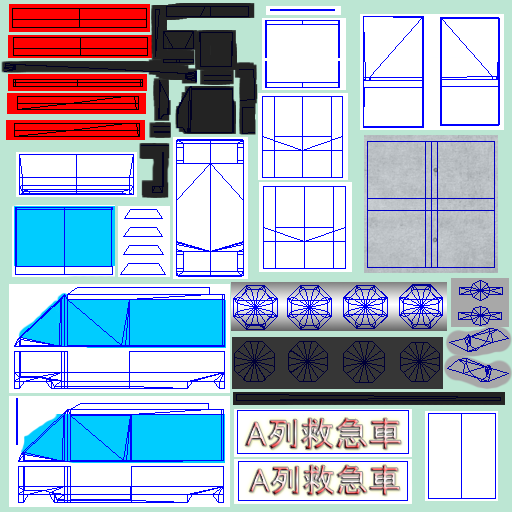
<style>
.page{position:relative;width:512px;height:512px;background:#ffffff}
.page>*{position:absolute;margin:0}
.t1{font:34px "MS-UIGothic"}
.t2{font:32.8px "MS-UIGothic"}
</style>
<div class="page">
<p class="t1" style="left:245px;top:418px;width:156px;height:31px">A列救急車</p>
<p class="t2" style="left:249px;top:465px;width:150px;height:30px">A列救急車</p>
</div>
